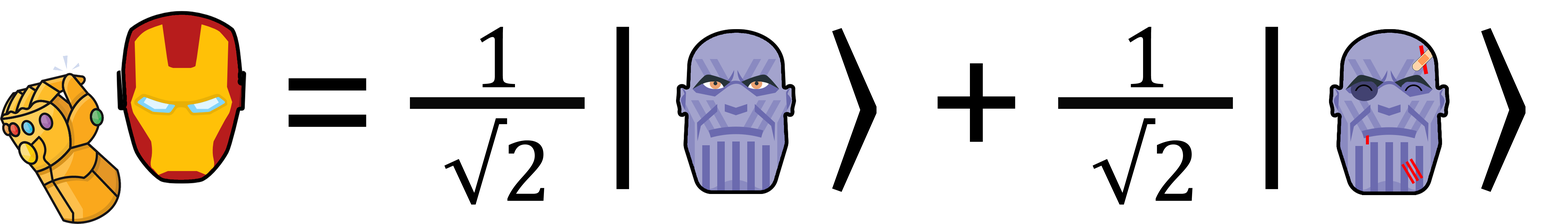
<style>
.page{position:relative;width:1568px;height:224px;background:#ffffff}
.page>*{position:absolute;margin:0}
.t1{font:179.2px "Cambria";color:#000000}
.t2{font:179.2px "SitkaSmall-Italic";color:#000000}
.t3{font:89.6px "Cambria";color:#000000}
</style>
<div class="page">
<p class="t1" style="left:289px;top:27px;width:1237px;height:165px">=     <span class="t2">|</span>    ⟩ +     <span class="t2">|</span>    ⟩</p>
<p class="t3" style="left:480px;top:27px;width:35px;height:60px">1</p>
<p class="t3" style="left:1128px;top:27px;width:35px;height:60px">1</p>
<p class="t3" style="left:444px;top:118px;width:100px;height:87px">√2</p>
<p class="t3" style="left:1093px;top:118px;width:100px;height:87px">√2</p>
</div>
